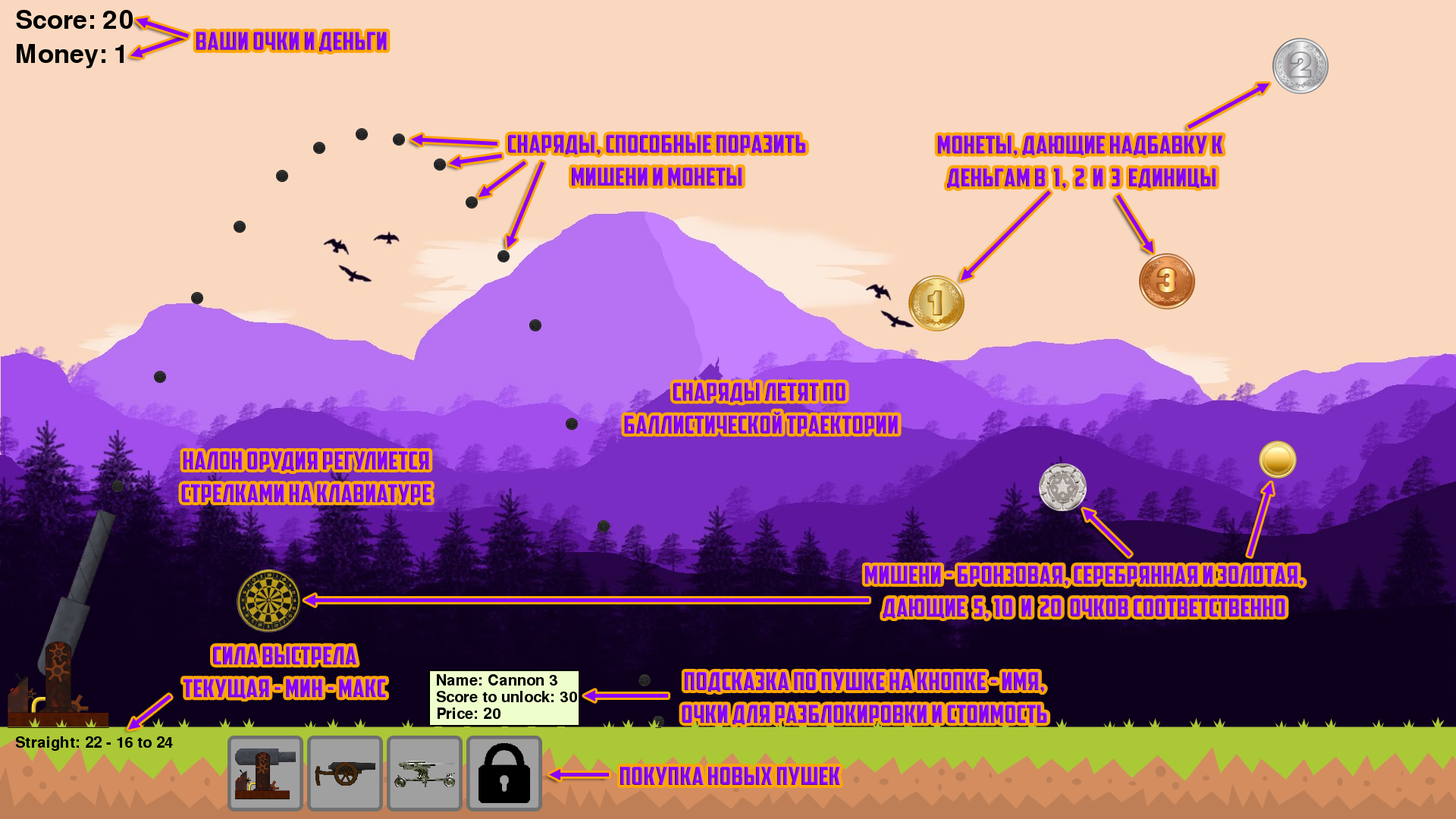
<style>
.page{position:relative;width:1456px;height:819px;background:#fad8bf}
.page>*{position:absolute;margin:0}
.t1{font:25.1px "TheCapt";letter-spacing:0.005em;color:#8b00ff;text-transform:uppercase;scale:1.09 1}
.t2{font:25.1px "TheCapt";letter-spacing:0.005em;text-transform:uppercase;scale:1.09 1}
</style>
<div class="page">
<p class="t1" style="left:196px;top:31px;width:192px;height:21px">Ваши очки и деньги</p>
<p class="t2" style="left:508px;top:134px;width:298px;height:52px;text-align:center">Снаряды, способные поразить<br>мишени и монеты</p>
<p class="t2" style="left:937px;top:135px;width:286px;height:53px;text-align:center">Монеты, ДАЮЩИЕ надбавку к <br>деньгам в  1,  2  и  3  единицы</p>
<p class="t2" style="left:624px;top:382px;width:275px;height:52px;text-align:center">Снаряды летят по <br>баллистической траектории</p>
<p class="t2" style="left:181px;top:451px;width:250px;height:52px;text-align:center">Налон орудия регулиется<br>стрелками на клавиатуре</p>
<p class="t2" style="left:864px;top:565px;width:440px;height:54px;text-align:center">Мишени - Бронзовая, Серебрянная и золотая,<br>дающие  5, 10  и  20  очков соответственно</p>
<p class="t1" style="left:183px;top:646px;width:203px;height:53px;text-align:center">Сила выстрела<br>Текущая - мин - Макс</p>
<p class="t2" style="left:682px;top:672px;width:365px;height:53px;text-align:center">Подсказка по пушке на кнопке - имя,<br>очки для разблокировки и стоимость</p>
<p class="t2" style="left:620px;top:767px;width:220px;height:18px">Покупка новых пушек</p>
</div>
